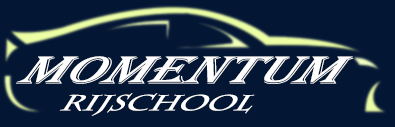
<style>
.page{position:relative;width:395px;height:127px;background:#031634}
.page>*{position:absolute;margin:0}
.t1{font:50.1px "Algerian";color:#ffffff;scale:1.22 1}
.t2{font:26px "CharlemagneStd-Bold";color:#ffffff;scale:1.15 1}
</style>
<div class="page">
<p class="t1" style="left:16px;top:56px;width:338px;height:28px">MOMENTUM</p>
<p class="t2" style="left:59px;top:93px;width:196px;height:23px">rijschool</p>
</div>
